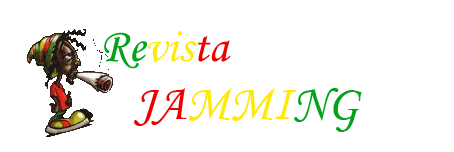
<style>
.page{position:relative;width:454px;height:152px;background:#ffffff}
.page>*{position:absolute;margin:0}
.t1{font:48px "MonotypeCorsiva";color:#ffea06}
.t2{font:48px "MonotypeCorsiva";color:#03a31d}
.t3{font:48px "MonotypeCorsiva";color:#ee0000}
.t4{font:25.7px "MVBoli";color:#ffea06}
.t5{font:51.4px "MonotypeCorsiva";color:#ee0000}
.t6{font:51.4px "MonotypeCorsiva";color:#ffea06}
.t7{font:51.4px "MonotypeCorsiva";color:#03a31d}
</style>
<div class="page">
<p class="t1" style="left:104px;top:31px;width:127px;height:38px"><span class="t2">Re</span>vis<span class="t3">ta</span></p>
<p class="t4" style="left:134px;top:88px;width:228px;height:44px">JajjJAMMING<span class="t5">JA</span><span class="t6">MMI</span><span class="t7">NG</span></p>
</div>
